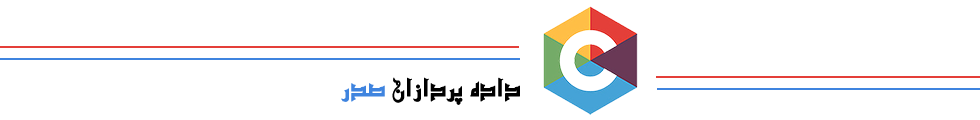
<style>
.page{position:relative;width:980px;height:120px;background:#ffffff}
.page>*{position:absolute;margin:0}
.t1{font:24px "Wjihoon";color:#000000;font-weight:bold}
.t2{font:24px "Wjihoon";color:#3f84df;font-weight:bold}
</style>
<div class="page">
<p class="t1" style="left:341px;top:77px;width:179px;height:28px">داده پردازان <span class="t2">صدر</span></p>
</div>
